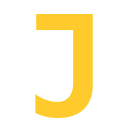
<style>
.page{position:relative;width:128px;height:128px;background:#ffffff}
.page>*{position:absolute;margin:0}
.t1{font:160px "Consolas-Bold";color:#ffcb2c}
</style>
<div class="page">
<p class="t1" style="left:35px;top:14px;width:58px;height:104px">J</p>
</div>
